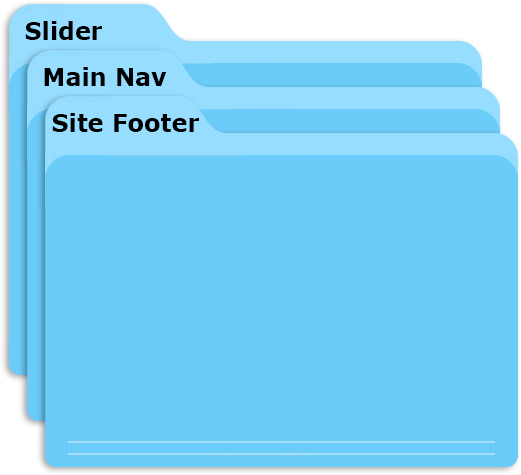
<style>
.page{position:relative;width:521px;height:475px;background:#6bccf9}
.page>*{position:absolute;margin:0}
.t1{font:24px "Verdana-Bold";color:#000000}
</style>
<div class="page">
<p class="t1" style="left:25px;top:21px;width:77px;height:19px">Slider</p>
<p class="t1" style="left:44px;top:67px;width:123px;height:19px">Main Nav</p>
<p class="t1" style="left:52px;top:113px;width:147px;height:19px">Site Footer</p>
</div>
